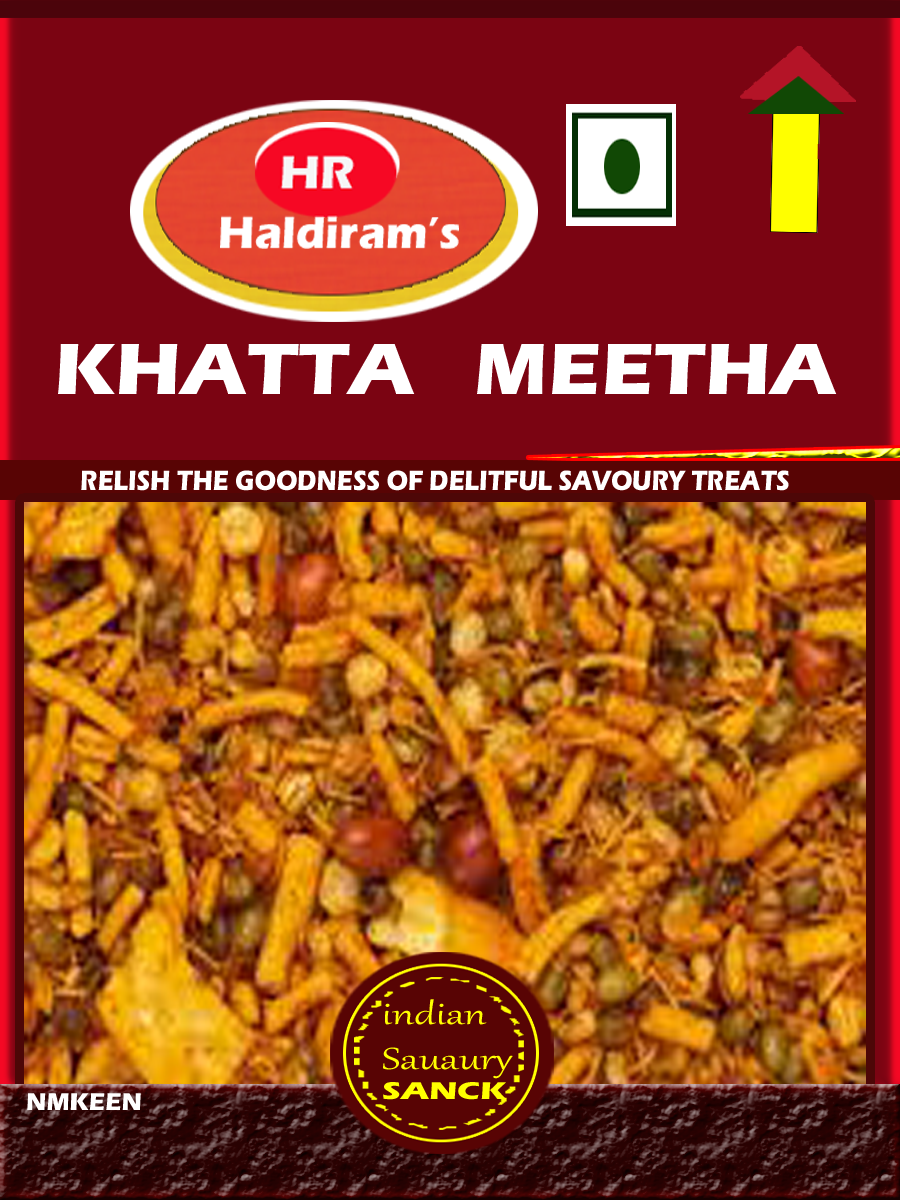
<style>
.page{position:relative;width:900px;height:1200px;background:#7b0412}
.page>*{position:absolute;margin:0}
.t1{font:75px "ErasITC-Bold";color:#ffffff;scale:1.07 1}
.t2{font:28.8px "ErasITC-Bold";color:#ffffff;scale:0.86 1}
.t3{font:37.5px "Gabriola";color:#ffff00;scale:1.38 1}
.t4{font:25px "ErasITC-Bold";color:#ffff00;scale:1.38 1}
.t5{font:25px "ErasITC-Bold";color:#ffffff}
</style>
<div class="page">
<p class="t1" style="left:58px;top:344px;width:779px;height:50px">KHATTA   MEETHA</p>
<p class="t2" style="left:81px;top:470px;width:708px;height:21px">RELISH THE GOODNESS OF DELITFUL SAVOURY TREATS</p>
<p class="t3" style="left:383px;top:999px;width:130px;height:101px">indian<br>Sauaury<br><span class="t4">SANCK</span></p>
<p class="t5" style="left:27px;top:1093px;width:114px;height:17px">NMKEEN</p>
</div>
